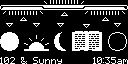
<style>
.page{position:relative;width:128px;height:64px;background:#000000}
.page>*{position:absolute;margin:0}
.t1{font:8.3px "pixelmix";color:#ffffff}
</style>
<div class="page">
<p class="t1" style="left:0px;top:57px;width:62px;height:7px">102 &amp; Sunny</p>
<p class="t1" style="left:93px;top:57px;width:35px;height:7px">10:35am</p>
</div>
